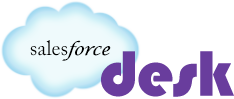
<style>
.page{position:relative;width:234px;height:99px;background:#ffffff}
.page>*{position:absolute;margin:0}
.t1{font:20.8px "ACaslonPro-Regular";color:#000000}
.t2{font:16.7px "LucidaCalligraphy-Italic";color:#000000;font-style:italic}
.t3{font:66.7px "Bauhaus93";color:#693d9e}
</style>
<div class="page">
<p class="t1" style="left:30px;top:40px;width:38px;height:16px">sales</p>
<p class="t2" style="left:62px;top:40px;width:49px;height:21px">force</p>
<p class="t3" style="left:101px;top:51px;width:133px;height:46px">desk</p>
</div>
